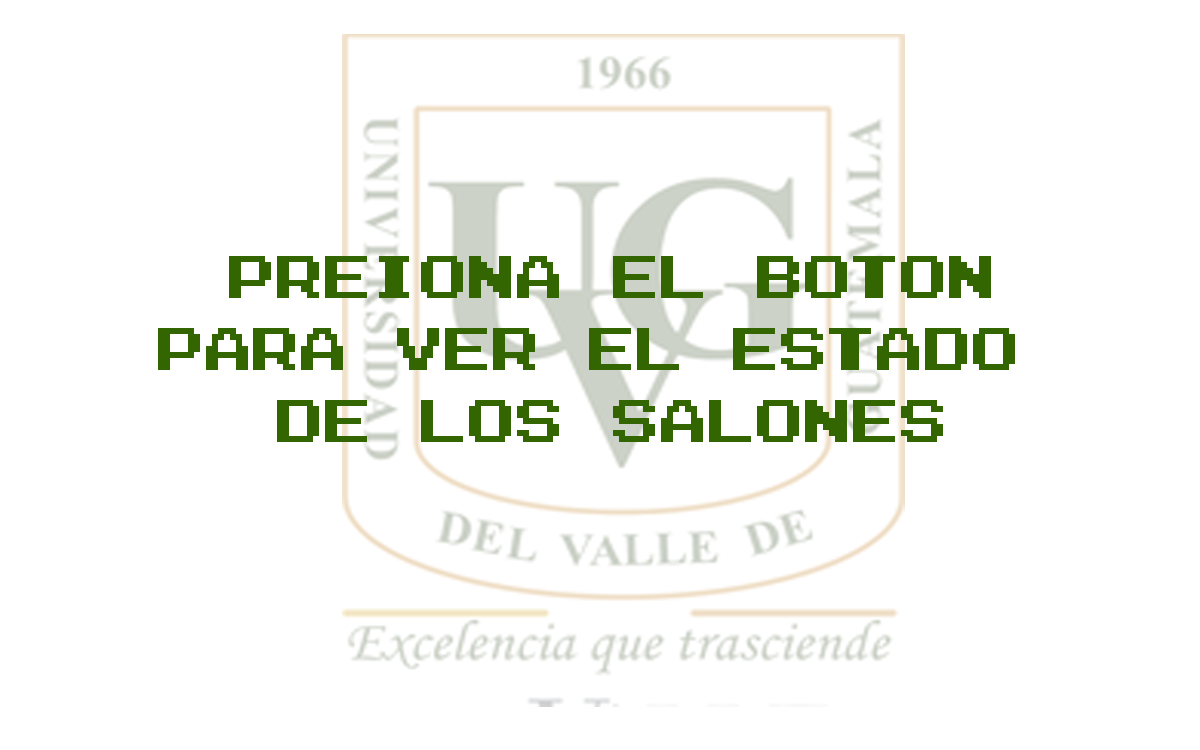
<style>
.page{position:relative;width:1200px;height:750px;background:#ffffff}
.page>*{position:absolute;margin:0}
.t1{font:60px "Zig";color:#336600}
</style>
<div class="page">
<p class="t1" style="left:158px;top:256px;width:857px;height:186px;text-align:center">Preiona el boton<br>para ver el estado <br>de los salones</p>
</div>
